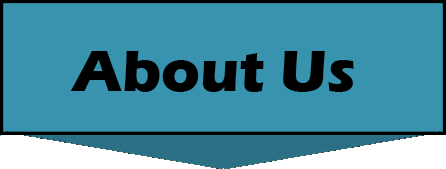
<style>
.page{position:relative;width:446px;height:169px;background:#3893ae}
.page>*{position:absolute;margin:0}
.t1{font:60px "ErasITC-Bold";color:#000000}
</style>
<div class="page">
<p class="t1" style="left:70px;top:51px;width:284px;height:41px">About Us</p>
</div>
